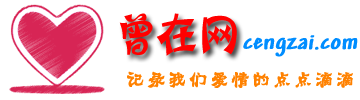
<style>
.page{position:relative;width:360px;height:100px;background:#ffffff}
.page>*{position:absolute;margin:0}
.t1{font:48px "HYn3gj";letter-spacing:-0.2em;color:#ff0000;font-weight:bold}
.t2{font:24px "Andy-Bold";color:#008dff;font-weight:bold;font-style:italic}
.t3{font:18px "JYanLin";letter-spacing:0.14em;color:#ff8100;font-weight:bold}
</style>
<div class="page">
<p class="t1" style="left:119px;top:13px;width:118px;height:43px">曾在 网</p>
<p class="t2" style="left:243px;top:35px;width:115px;height:22px">cengzai.com</p>
<p class="t3" style="left:127px;top:71px;width:226px;height:17px">记录我们爱情的点点滴滴</p>
</div>
